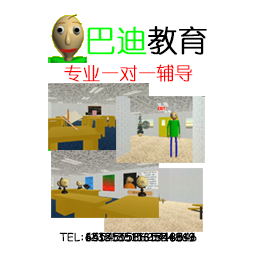
<style>
.page{position:relative;width:256px;height:256px;background:#ffffff}
.page>*{position:absolute;margin:0}
.t1{font:30px "YouYuan";color:#00ff00;font-weight:bold}
.t2{font:30px "YouYuan";color:#000000;font-weight:bold}
.t3{font:18px "YouYuan";color:#ff0000;font-weight:bold}
.t4{font:11px "ComicSansMS";color:#000000;font-weight:bold}
</style>
<div class="page">
<p class="t1" style="left:87px;top:26px;width:120px;height:29px">巴迪<span class="t2">教育</span></p>
<p class="t3" style="left:64px;top:64px;width:129px;height:18px">专业一对一辅导</p>
<p class="t4" style="left:59px;top:232px;width:24px;height:10px">TEL:</p>
<p class="t4" style="left:85px;top:232px;width:110px;height:10px">65155551131546813</p>
<p class="t4" style="left:85px;top:232px;width:110px;height:10px">4454515862554869</p>
<p class="t4" style="left:86px;top:232px;width:111px;height:10px">12321351565418546</p>
</div>
